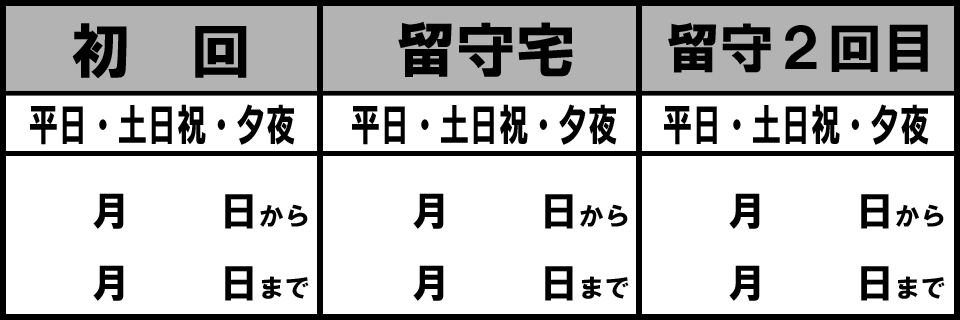
<style>
.page{position:relative;width:960px;height:320px;background:#ffffff}
.page>*{position:absolute;margin:0}
.t1{font:60px "HGSoeiKakugothicUB";color:#000000}
.t2{font:54px "HGSoeiKakugothicUB";color:#000000}
.t3{font:43.5px "HGSoeiKakugothicUB";color:#000000;scale:0.68 1}
.t4{font:40px/72px "HGSoeiKakugothicUB";color:#000000}
.t5{font:26px/72px "HGSoeiKakugothicUB";color:#000000}
</style>
<div class="page">
<p class="t1" style="left:72px;top:23px;width:175px;height:56px">初　回</p>
<p class="t1" style="left:398px;top:21px;width:175px;height:56px">留守宅</p>
<p class="t2" style="left:668px;top:22px;width:260px;height:51px">留守２回目</p>
<p class="t3" style="left:30px;top:104px;width:265px;height:41px">平日・土日祝・夕夜</p>
<p class="t3" style="left:352px;top:104px;width:265px;height:41px">平日・土日祝・夕夜</p>
<p class="t3" style="left:664px;top:104px;width:265px;height:41px">平日・土日祝・夕夜</p>
<p class="t4" style="left:93px;top:193px;width:216px;height:108px;text-align:right">月　　日<span class="t5">から<br></span>月　　日<span class="t5">まで</span></p>
<p class="t4" style="left:413px;top:193px;width:216px;height:108px;text-align:right">月　　日<span class="t5">から<br></span>月　　日<span class="t5">まで</span></p>
<p class="t4" style="left:729px;top:193px;width:216px;height:108px;text-align:right">月　　日<span class="t5">から<br></span>月　　日<span class="t5">まで</span></p>
</div>
